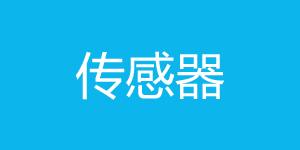
<style>
.page{position:relative;width:300px;height:150px;background:#0cb6ec}
.page>*{position:absolute;margin:0}
.t1{font:50px "MicrosoftYaHei";color:#ffffff}
</style>
<div class="page">
<p class="t1" style="left:75px;top:51px;width:150px;height:49px">传感器</p>
</div>
